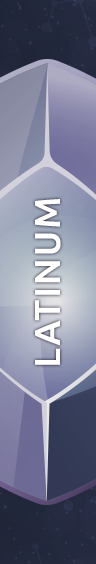
<style>
.page{position:relative;width:96px;height:564px}
.page>*{position:absolute;margin:0}
.t1{font:36px "Ubuntu-Medium";letter-spacing:0.06em;color:#ffffff}
</style>
<div class="page">
<p class="t1" style="left:35px;top:199px;width:26px;height:166px;rotate:-90deg">LATINUM</p>
</div>
